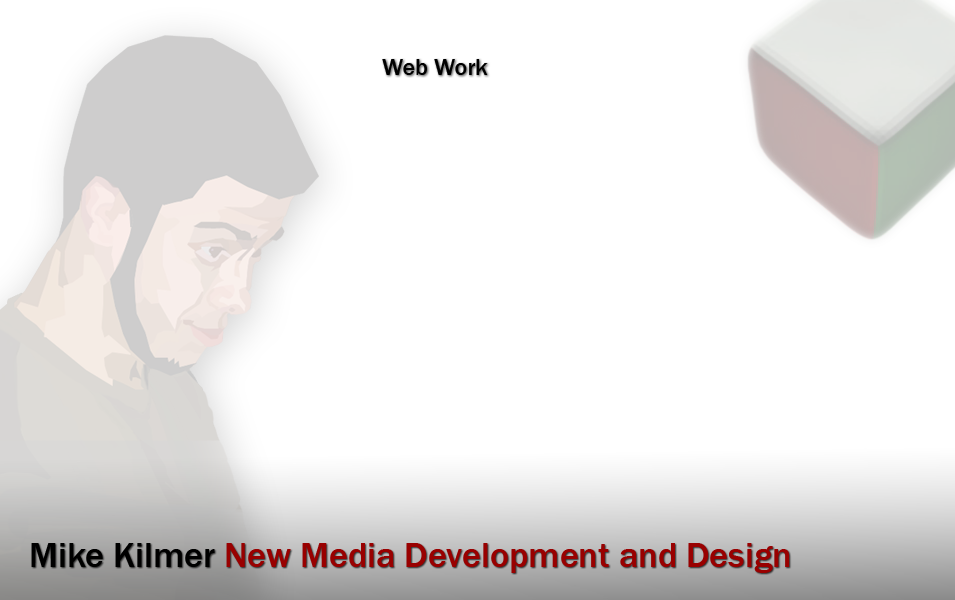
<style>
.page{position:relative;width:955px;height:600px;background:#ffffff}
.page>*{position:absolute;margin:0}
.t1{font:24px "FranklinGothic-Medium";color:#000000}
.t2{font:36px "FranklinGothic-Medium";color:#990000}
.t3{font:36px "FranklinGothic-Medium";color:#000000}
</style>
<div class="page">
<p class="t1" style="left:382px;top:59px;width:106px;height:16px">Web Work</p>
<p class="t2" style="left:31px;top:543px;width:759px;height:30px"><span class="t3">Mike Kilmer </span>New Media Development and Design</p>
</div>
